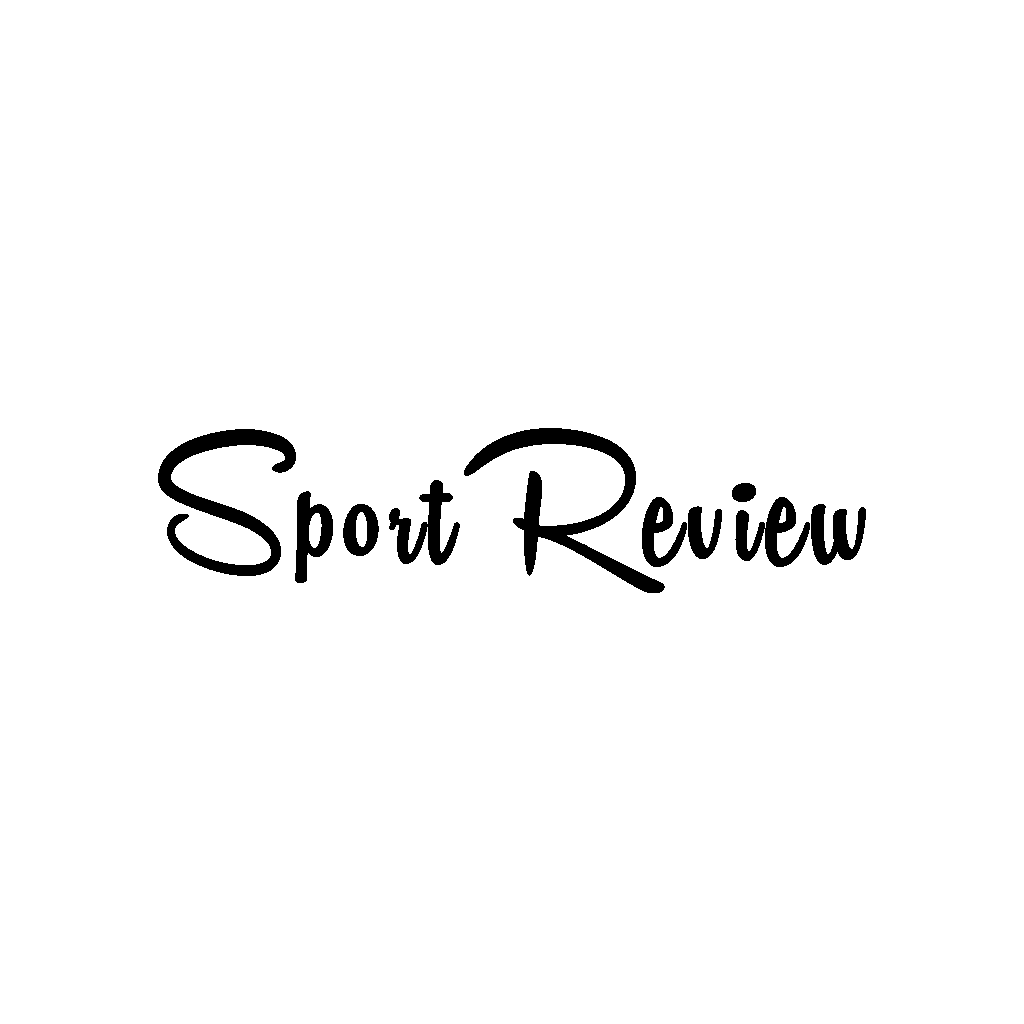
<style>
.page{position:relative;width:1024px;height:1024px;background:#ffffff}
.page>*{position:absolute;margin:0}
.t1{font:204.6px "RemachineScriptPersonalUseOnly";letter-spacing:0.04em;color:#000000;scale:0.85 1}
</style>
<div class="page">
<p class="t1" style="left:158px;top:428px;width:708px;height:165px">SportReview</p>
</div>
